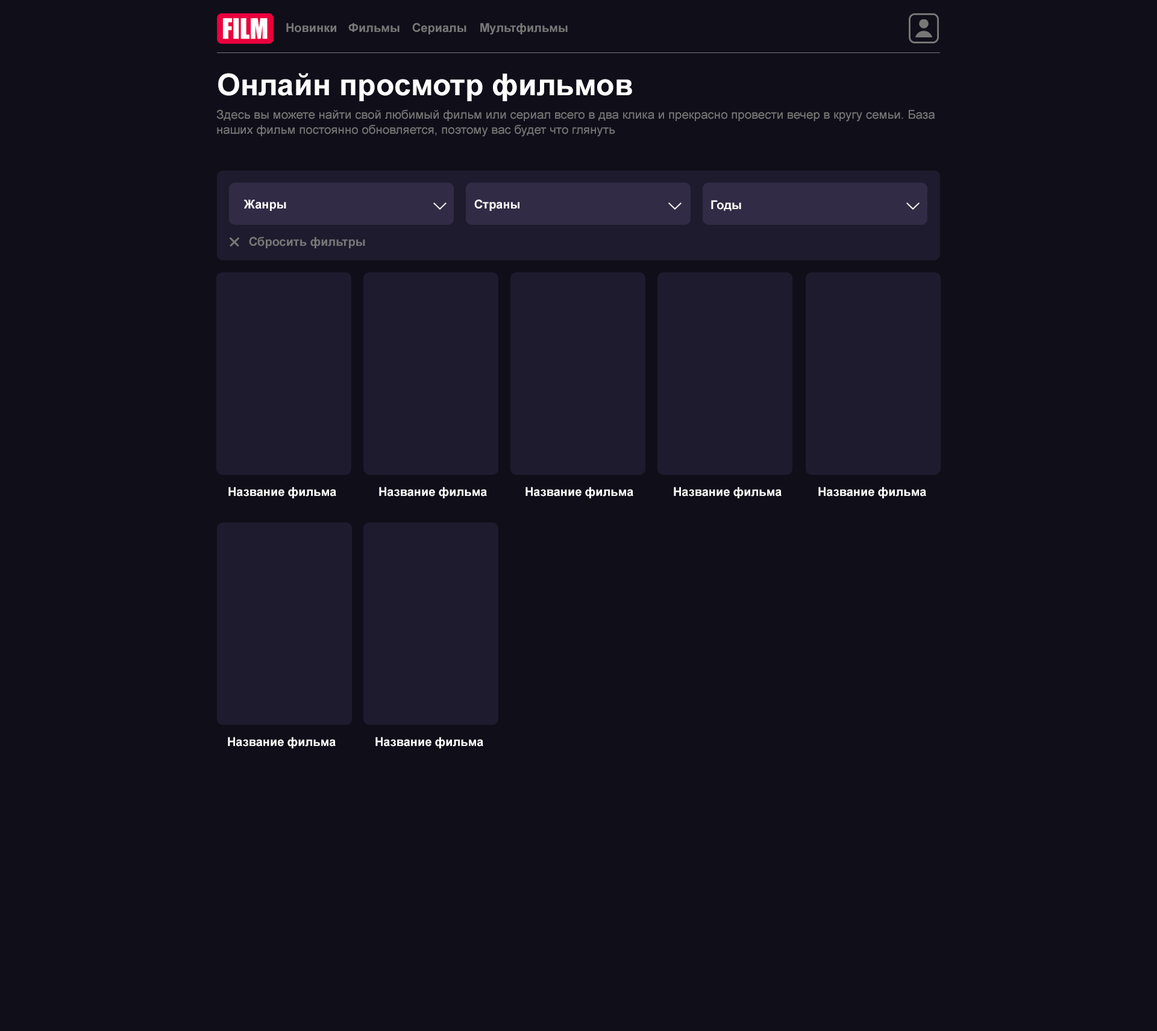
<style>
.page{position:relative;width:1157px;height:1031px;background:#100e19}
.page>*{position:absolute;margin:0}
.t1{font:12px "Arial-BoldMT";color:#777777}
.t2{font:30.1px "Arial-BoldMT";color:#ffffff}
.t3{font:12px/15.1px "ArialMT";color:#777777}
.t4{font:12px "Arial-BoldMT";color:#ffffff}
</style>
<div class="page">
<p class="t1" style="left:286px;top:23px;width:50px;height:10px">Новинки</p>
<p class="t1" style="left:348px;top:23px;width:51px;height:10px">Фильмы</p>
<p class="t1" style="left:412px;top:23px;width:54px;height:11px">Сериалы</p>
<p class="t1" style="left:480px;top:23px;width:88px;height:12px">Мультфильмы</p>
<p class="t2" style="left:218px;top:73px;width:414px;height:28px">Онлайн просмотр фильмов</p>
<p class="t3" style="left:216px;top:110px;width:718px;height:27px">Здесь вы можете найти свой любимый фильм или сериал всего в два клика и прекрасно провести вечер в кругу семьи. База <br>наших фильм постоянно обновляется, поэтому вас будет что глянуть</p>
<p class="t4" style="left:244px;top:199px;width:42px;height:12px">Жанры</p>
<p class="t4" style="left:474px;top:199px;width:45px;height:12px">Страны</p>
<p class="t4" style="left:711px;top:200px;width:30px;height:11px">Годы</p>
<p class="t1" style="left:249px;top:237px;width:116px;height:11px">Сбросить фильтры</p>
<p class="t4" style="left:228px;top:487px;width:108px;height:11px">Название фильма</p>
<p class="t4" style="left:379px;top:487px;width:108px;height:11px">Название фильма</p>
<p class="t4" style="left:525px;top:487px;width:108px;height:11px">Название фильма</p>
<p class="t4" style="left:674px;top:487px;width:107px;height:11px">Название фильма</p>
<p class="t4" style="left:818px;top:487px;width:108px;height:11px">Название фильма</p>
<p class="t4" style="left:228px;top:737px;width:108px;height:11px">Название фильма</p>
<p class="t4" style="left:375px;top:737px;width:108px;height:11px">Название фильма</p>
</div>
